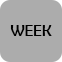
<style>
.page{position:relative;width:62px;height:62px;background:#acacac}
.page>*{position:absolute;margin:0}
.t1{font:16px "BerlinSansFB-Reg";color:#000000}
</style>
<div class="page">
<p class="t1" style="left:10px;top:25px;width:42px;height:11px">WEEK</p>
</div>
